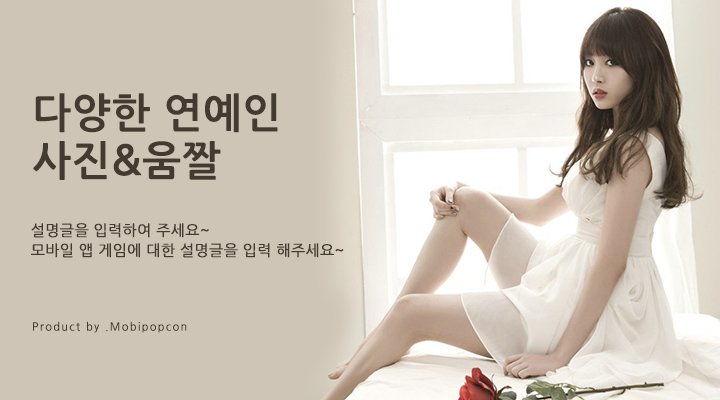
<style>
.page{position:relative;width:720px;height:400px;background:#cec5b6}
.page>*{position:absolute;margin:0}
.t1{font:40.9px/47.7px "NanumGothicBold";font-weight:bold}
.t2{font:40.9px/47.7px "NanumGothicBold";color:#433a30;font-weight:bold}
.t3{font:15px/20px "NanumGothic";color:#433a30;font-weight:bold}
.t4{font:11px "NanumGothic";letter-spacing:0.12em;color:#433a30;font-weight:bold;scale:0.97 1}
</style>
<div class="page">
<p class="t1" style="left:33px;top:93px;width:245px;height:87px">다양한 모바일 <br>웹툰 만화</p>
<p class="t2" style="left:33px;top:93px;width:245px;height:87px">다양한 연예인<br>사진&amp;움짤</p>
<p class="t1" style="left:35px;top:93px;width:246px;height:84px">다양한 동영상<br>Best 05</p>
<p class="t3" style="left:31px;top:223px;width:313px;height:35px">설명글을 입력하여 주세요~<br>모바일 앱 게임에 대한 설명글을 입력 해주세요~</p>
<p class="t3" style="left:31px;top:223px;width:313px;height:35px">설명글을 입력하여 주세요~<br>모바일 앱 게임에 대한 설명글을 입력 해주세요~</p>
<p class="t3" style="left:31px;top:223px;width:313px;height:35px">설명글을 입력하여 주세요~<br>모바일 앱 게임에 대한 설명글을 입력 해주세요~</p>
<p class="t4" style="left:33px;top:321px;width:154px;height:12px">Product by .Mobipopcon</p>
<p class="t4" style="left:33px;top:321px;width:154px;height:12px">Product by .Mobipopcon</p>
<p class="t4" style="left:33px;top:321px;width:154px;height:12px">Product by .Mobipopcon</p>
</div>
